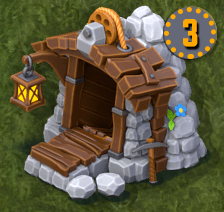
<style>
.page{position:relative;width:224px;height:212px}
.page>*{position:absolute;margin:0}
.t1{font:36px "Danger";letter-spacing:-0.03em;color:#ffa800;font-weight:bold;scale:0.92 1}
</style>
<div class="page">
<p class="t1" style="left:183px;top:19px;width:15px;height:28px">3</p>
</div>
